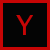
<style>
.page{position:relative;width:50px;height:50px;background:#040404}
.page>*{position:absolute;margin:0}
.t1{font:27.6px "LucidaGrande";color:#c70505}
</style>
<div class="page">
<p class="t1" style="left:16px;top:15px;width:17px;height:20px">Y</p>
</div>
